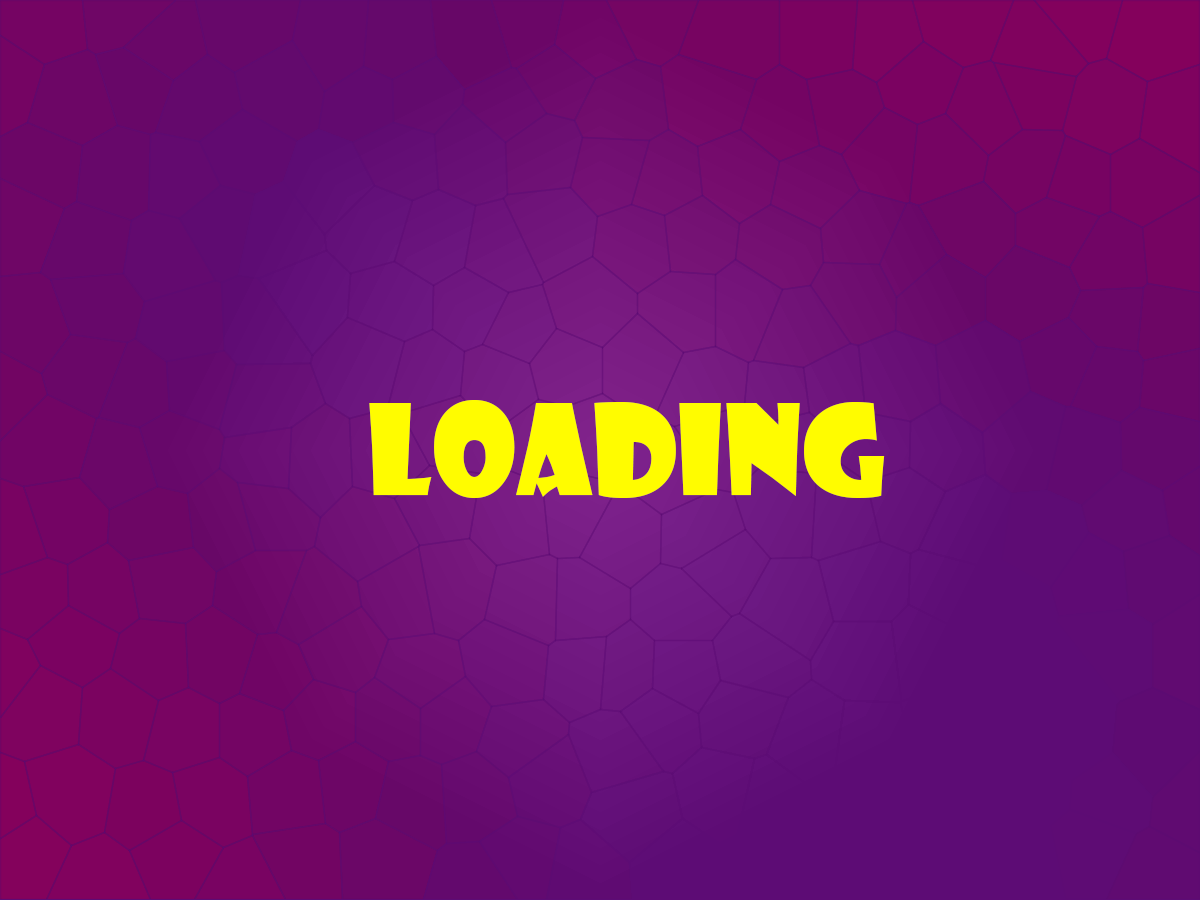
<style>
.page{position:relative;width:1200px;height:900px}
.page>*{position:absolute;margin:0}
.t1{font:122px "ShowcardGothic-Reg";color:#fffc00}
</style>
<div class="page">
<p class="t1" style="left:369px;top:400px;width:516px;height:98px">LOADING</p>
</div>
